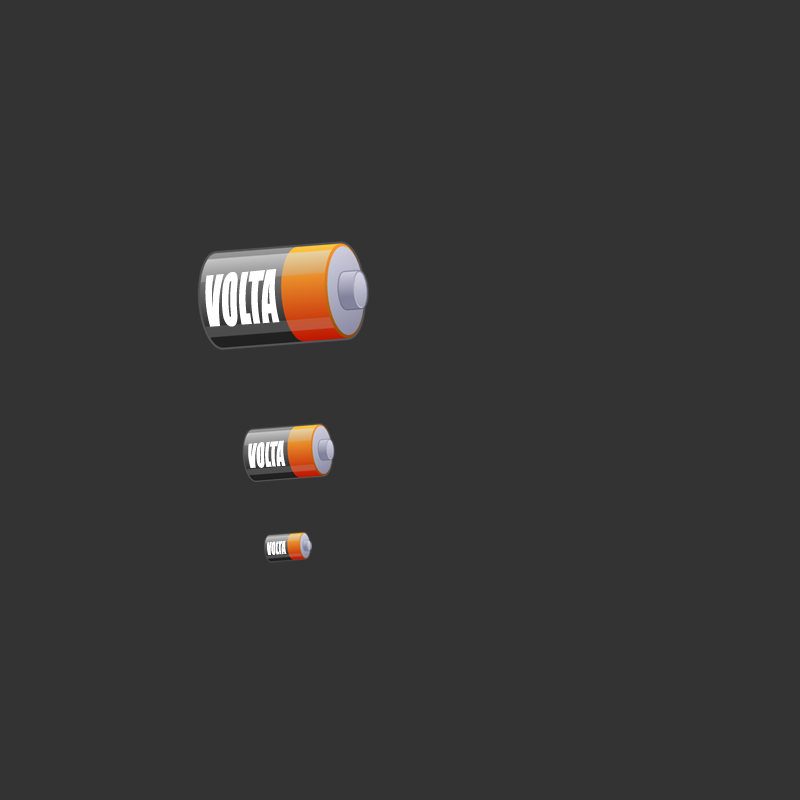
<style>
.page{position:relative;width:800px;height:800px;background:#333333}
.page>*{position:absolute;margin:0}
.t1{font:63.1px "Impact";color:#ffffff;scale:0.5 1}
.t2{font:29.9px "Impact";color:#ffffff;scale:0.53 1}
.t3{font:15.4px "Impact";color:#ffffff;scale:0.53 1}
</style>
<div class="page">
<p class="t1" style="left:205px;top:269px;width:75px;height:58px;rotate:-4deg">VOLTA</p>
<p class="t2" style="left:248px;top:440px;width:38px;height:28px;rotate:-4deg">VOLTA</p>
<p class="t3" style="left:267px;top:540px;width:20px;height:15px;rotate:-4deg">VOLTA</p>
</div>
